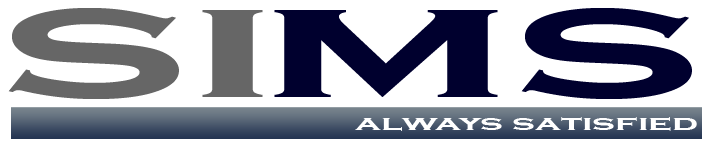
<style>
.page{position:relative;width:720px;height:144px;background:#ffffff}
.page>*{position:absolute;margin:0}
.t1{font:159.1px "CopperplateGothic-Bold";color:#666666;scale:1.93 1}
.t2{font:159.1px "CopperplateGothic-Bold";color:#00002e;scale:1.93 1}
.t3{font:22.2px "CopperplateGothic-Bold";color:#ffffff;scale:1.67 1}
</style>
<div class="page">
<p class="t1" style="left:8px;top:8px;width:255px;height:91px">si</p>
<p class="t2" style="left:274px;top:8px;width:418px;height:91px">ms</p>
<p class="t3" style="left:355px;top:117px;width:342px;height:14px">always satisfied</p>
</div>
